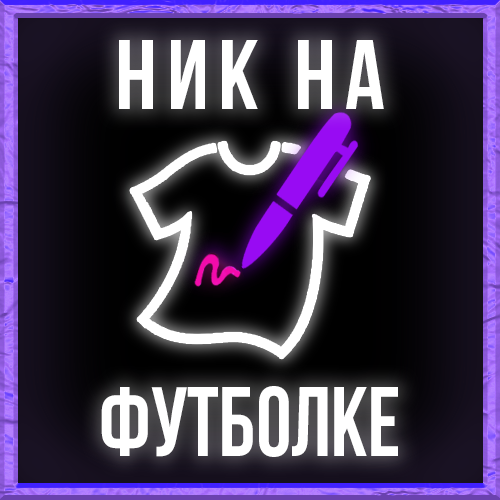
<style>
.page{position:relative;width:500px;height:500px}
.page>*{position:absolute;margin:0}
.t1{font:98px "BebasNeueBold";letter-spacing:0.1em;color:#ffffff}
.t2{font:98px "BebasNeueBold";color:#ffffff;scale:0.91 1}
</style>
<div class="page">
<p class="t1" style="left:119px;top:40px;width:265px;height:69px">ник на</p>
<p class="t2" style="left:101px;top:386px;width:297px;height:71px">футболке</p>
</div>
